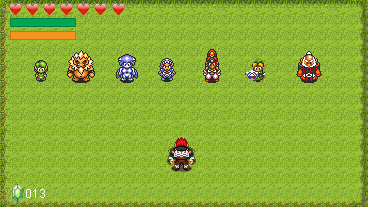
<style>
.page{position:relative;width:368px;height:207px;background:#9cc441}
.page>*{position:absolute;margin:0}
.t1{font:12px "ArialMT";color:#fffefe}
</style>
<div class="page">
<p class="t1" style="left:26px;top:189px;width:19px;height:9px">013</p>
</div>
